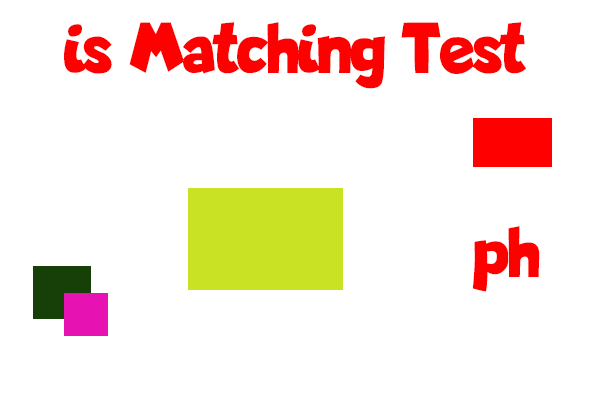
<style>
.page{position:relative;width:600px;height:400px;background:#ffffff}
.page>*{position:absolute;margin:0}
.t1{font:72px "LapsusPro-Bold";color:#ff0000}
</style>
<div class="page">
<p class="t1" style="left:64px;top:22px;width:462px;height:67px">is Matching Test</p>
<p class="t1" style="left:472px;top:226px;width:68px;height:66px">ph</p>
</div>
